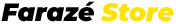
<style>
.page{position:relative;width:176px;height:24px;background:#ffffff}
.page>*{position:absolute;margin:0}
.t1{font:25px "Montserrat-BlackItalic";color:#000000}
.t2{font:25px "Montserrat-BlackItalic";color:#fce208}
</style>
<div class="page">
<p class="t1" style="left:1px;top:1px;width:173px;height:21px">Farazé <span class="t2">Store</span></p>
</div>
